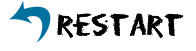
<style>
.page{position:relative;width:196px;height:51px;background:#ffffff}
.page>*{position:absolute;margin:0}
.t1{font:27.5px "Eraser-Regular";color:#000000}
</style>
<div class="page">
<p class="t1" style="left:57px;top:13px;width:126px;height:25px">restart</p>
<p class="t1" style="left:57px;top:13px;width:126px;height:25px">restart</p>
</div>
